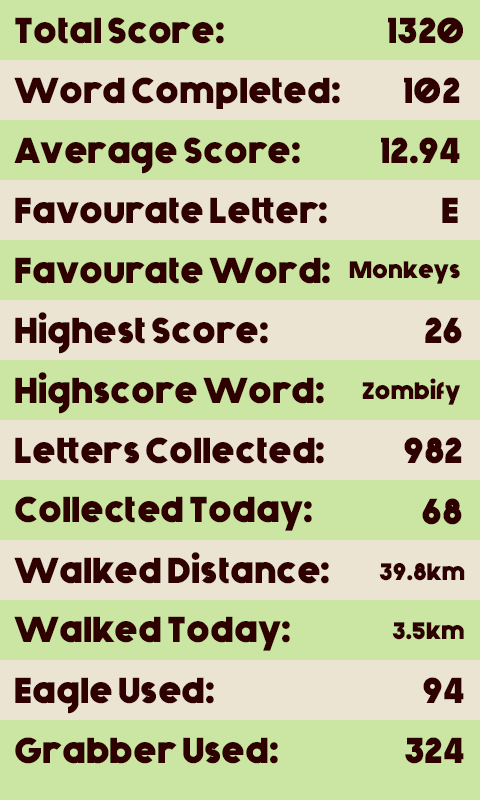
<style>
.page{position:relative;width:480px;height:800px;background:#cbe6a3}
.page>*{position:absolute;margin:0}
.t1{font:36px "Generica-Bold";color:#2f0000}
.t2{font:24px "Generica-Bold";color:#2f0000}
</style>
<div class="page">
<p class="t1" style="left:15px;top:17px;width:209px;height:27px">Total Score:</p>
<p class="t1" style="left:388px;top:17px;width:75px;height:27px">1320</p>
<p class="t1" style="left:14px;top:77px;width:326px;height:32px">Word Completed:</p>
<p class="t1" style="left:404px;top:77px;width:56px;height:27px">102</p>
<p class="t1" style="left:14px;top:137px;width:286px;height:37px">Average Score:</p>
<p class="t1" style="left:381px;top:137px;width:79px;height:27px">12.94</p>
<p class="t1" style="left:15px;top:197px;width:312px;height:27px">Favourate Letter:</p>
<p class="t1" style="left:442px;top:197px;width:16px;height:26px">E</p>
<p class="t1" style="left:15px;top:257px;width:315px;height:27px">Favourate Word:</p>
<p class="t2" style="left:349px;top:261px;width:111px;height:23px">Monkeys</p>
<p class="t1" style="left:15px;top:312px;width:253px;height:42px">Highest Score:</p>
<p class="t1" style="left:425px;top:317px;width:37px;height:27px">26</p>
<p class="t1" style="left:15px;top:372px;width:309px;height:42px">Highscore Word:</p>
<p class="t2" style="left:362px;top:378px;width:98px;height:27px">Zombify</p>
<p class="t1" style="left:15px;top:437px;width:309px;height:27px">Letters Collected:</p>
<p class="t1" style="left:404px;top:437px;width:58px;height:27px">982</p>
<p class="t1" style="left:15px;top:496px;width:297px;height:35px">Collected Today:</p>
<p class="t1" style="left:422px;top:498px;width:40px;height:27px">68</p>
<p class="t1" style="left:14px;top:552px;width:315px;height:32px">Walked Distance:</p>
<p class="t2" style="left:379px;top:563px;width:86px;height:18px">39.8km</p>
<p class="t1" style="left:14px;top:616px;width:276px;height:35px">Walked Today:</p>
<p class="t2" style="left:392px;top:622px;width:72px;height:18px">3.5km</p>
<p class="t1" style="left:15px;top:677px;width:199px;height:37px">Eagle Used:</p>
<p class="t1" style="left:423px;top:677px;width:41px;height:26px">94</p>
<p class="t1" style="left:15px;top:737px;width:263px;height:27px">Grabber Used:</p>
<p class="t1" style="left:405px;top:737px;width:59px;height:27px">324</p>
</div>
